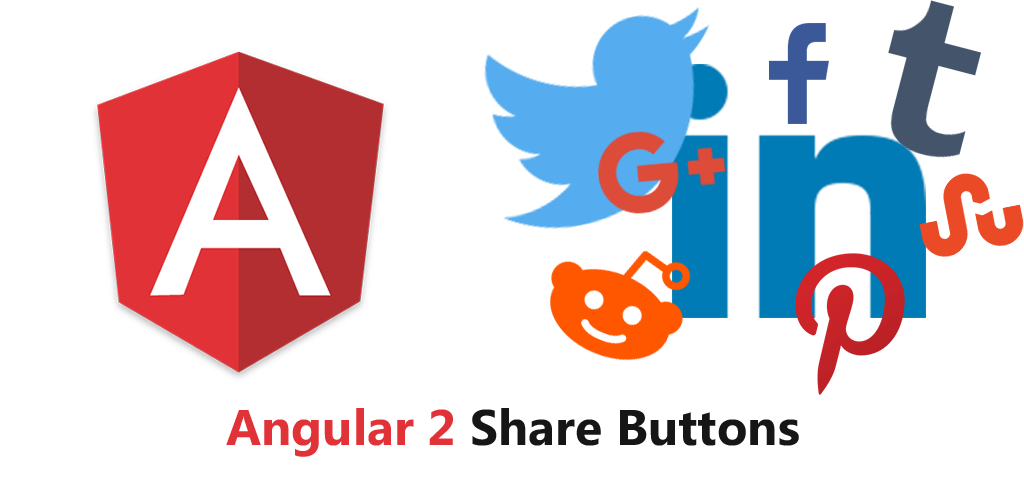
<style>
.page{position:relative;width:1024px;height:500px;background:#ffffff}
.page>*{position:absolute;margin:0}
.t1{font:50px "MicrosoftPhagsPa-Bold";color:#161616}
.t2{font:50px "MicrosoftPhagsPa-Bold";color:#e03237}
</style>
<div class="page">
<p class="t1" style="left:226px;top:408px;width:573px;height:49px"><span class="t2">Angular 2 </span>Share Buttons</p>
</div>
